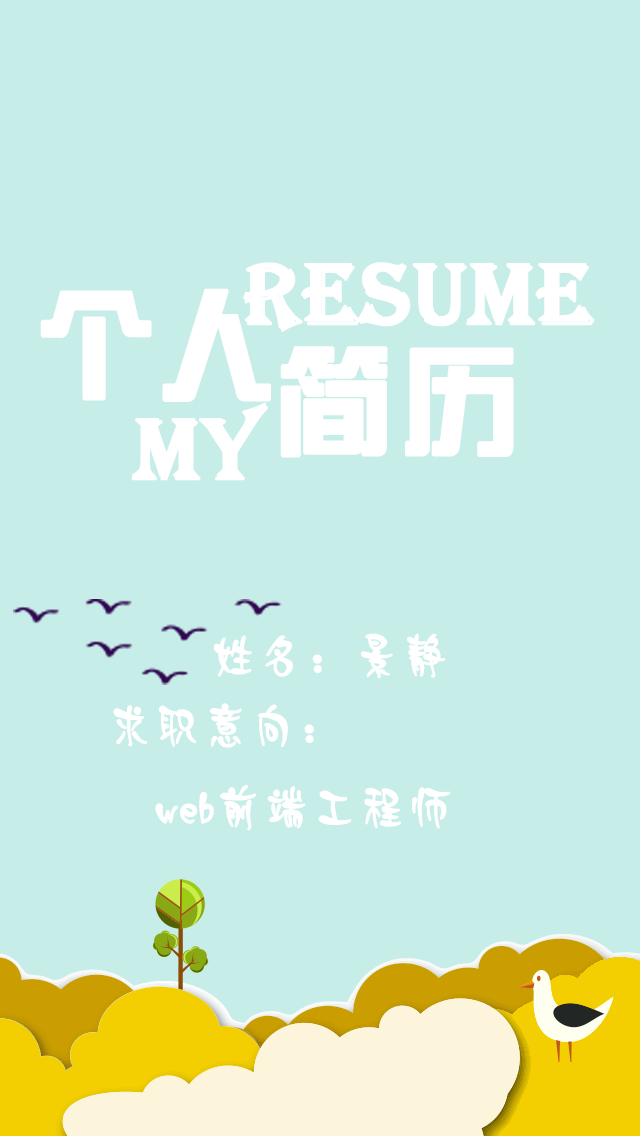
<style>
.page{position:relative;width:640px;height:1136px;background:#c7ede9}
.page>*{position:absolute;margin:0}
.t1{font:89.3px "Algerian";color:#ffffff;font-weight:bold}
.t2{font:120px "JZhongYi";color:#ffffff;font-weight:bold}
.t3{font:46.7px "JDaiYu";color:#ffffff;font-weight:bold}
</style>
<div class="page">
<p class="t1" style="left:243px;top:262px;width:352px;height:70px">resume</p>
<p class="t2" style="left:40px;top:288px;width:231px;height:114px">个人</p>
<p class="t2" style="left:280px;top:346px;width:234px;height:112px">简历</p>
<p class="t1" style="left:131px;top:402px;width:137px;height:79px">MY</p>
<p class="t3" style="left:214px;top:633px;width:232px;height:46px">姓名：景静</p>
<p class="t3" style="left:113px;top:703px;width:338px;height:128px">求职意向：<br>  web前端工程师</p>
</div>
